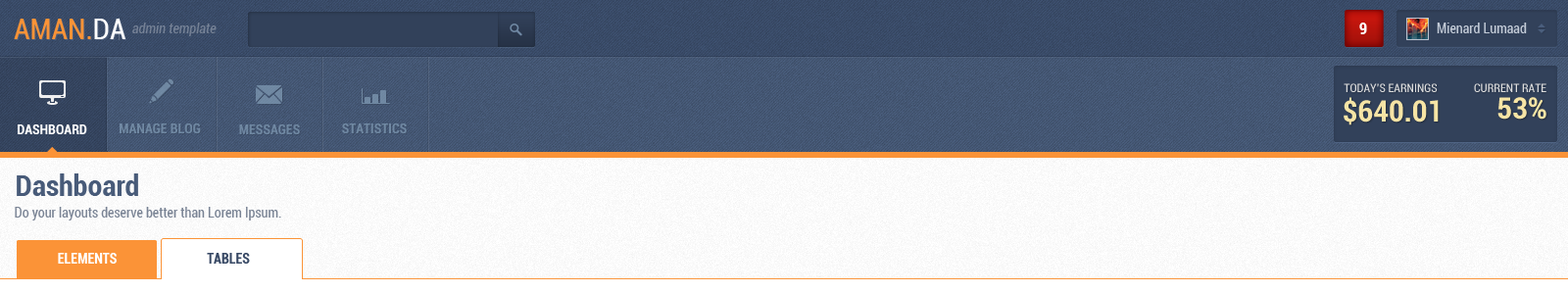
<style>
.page{position:relative;width:1568px;height:293px}
.page>*{position:absolute;margin:0}
.t1{font:29.4px "Roboto-Condensed";color:#fb9337}
.t2{font:29.4px "Roboto-Condensed";color:#ffffff}
.t3{font:13.7px "Roboto-CondensedItalic";color:#758296}
.t4{font:15.7px "Roboto-BoldCondensed";color:#ffffff}
.t5{font:13.7px "Roboto-Condensed";color:#c3cbd7}
.t6{font:11.8px "Roboto-Condensed";color:#dddddd;text-transform:uppercase}
.t7{font:29.4px "Roboto-BoldCondensed";color:#f6e4a5;text-transform:uppercase}
.t8{font:13.7px "Roboto-BoldCondensed";color:#ffffff;text-transform:uppercase}
.t9{font:13.7px "Roboto-BoldCondensed";color:#829db6;text-transform:uppercase}
.t10{font:29.4px "Roboto-BoldCondensed";color:#485b79}
.t11{font:13.7px "Roboto-Condensed";color:#798394}
.t12{font:13.7px "Roboto-BoldCondensed";color:#ffffff}
.t13{font:13.7px "Roboto-BoldCondensed";color:#384965}
</style>
<div class="page">
<p class="t1" style="left:14px;top:19px;width:111px;height:20px">AMAN.<span class="t2">DA</span></p>
<p class="t3" style="left:132px;top:23px;width:85px;height:13px">admin template</p>
<p class="t4" style="left:1359px;top:23px;width:8px;height:11px">9</p>
<p class="t5" style="left:1437px;top:23px;width:90px;height:10px">Mienard Lumaad</p>
<p class="t6" style="left:1344px;top:83px;width:94px;height:9px">today’s Earnings</p>
<p class="t6" style="left:1474px;top:83px;width:72px;height:9px">current rate</p>
<p class="t7" style="left:1344px;top:97px;width:95px;height:28px">$640.01</p>
<p class="t7" style="left:1497px;top:97px;width:49px;height:23px">53%</p>
<p class="t8" style="left:18px;top:124px;width:69px;height:10px">Dashboard</p>
<p class="t9" style="left:120px;top:123px;width:81px;height:10px;opacity:0.7">manage blog</p>
<p class="t9" style="left:239px;top:124px;width:61px;height:10px;opacity:0.7">messages</p>
<p class="t9" style="left:342px;top:123px;width:65px;height:10px;opacity:0.7">statistics</p>
<p class="t10" style="left:17px;top:173px;width:121px;height:23px">Dashboard</p>
<p class="t11" style="left:15px;top:207px;width:266px;height:13px">Do your layouts deserve better than Lorem Ipsum.</p>
<p class="t12" style="left:58px;top:253px;width:59px;height:11px">ELEMENTS</p>
<p class="t13" style="left:207px;top:253px;width:43px;height:11px">TABLES</p>
</div>
